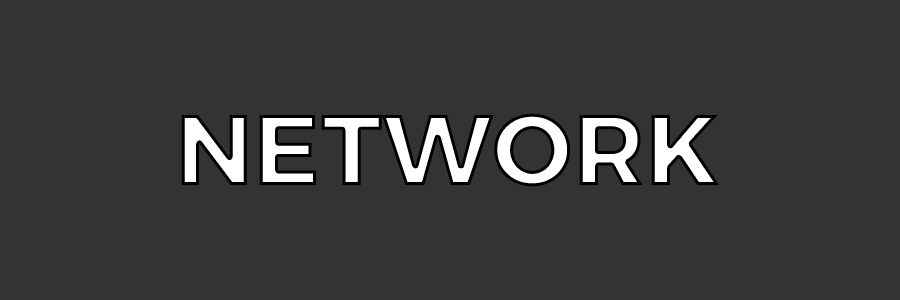
<style>
.page{position:relative;width:900px;height:300px;background:#333333}
.page>*{position:absolute;margin:0}
.t1{font:100px "Alexandria-Bold";color:#ffffff}
</style>
<div class="page">
<p class="t1" style="left:181px;top:113px;width:539px;height:74px">NETWORK</p>
</div>
